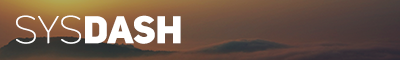
<style>
.page{position:relative;width:400px;height:60px}
.page>*{position:absolute;margin:0}
.t1{font:38px "UniSansHeavyCAPS";color:#ffffff;scale:1.05 1}
.t2{font:38px "UniNeueLight";color:#ffffff;scale:1.05 1}
</style>
<div class="page">
<p class="t1" style="left:16px;top:15px;width:165px;height:29px"><span class="t2">SYS</span>Dash</p>
</div>
